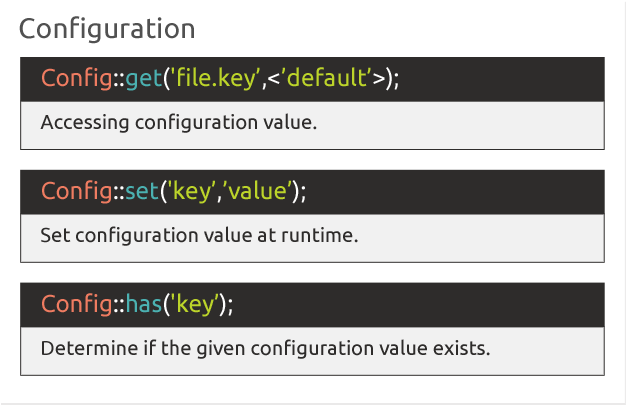
<style>
.page{position:relative;width:627px;height:405px;background:#ffffff}
.page>*{position:absolute;margin:0}
.t1{font:28.2px "Ubuntu";color:#515151}
.t2{font:24.2px "Ubuntu";color:#bcd42a}
.t3{font:24.2px "Ubuntu";color:#ef7c61}
.t4{font:24.2px "Ubuntu";color:#ffffff}
.t5{font:24.2px "Ubuntu";color:#4bb1b1}
.t6{font:20.2px "Ubuntu";color:#2e2c2b}
</style>
<div class="page">
<p class="t1" style="left:19px;top:16px;width:175px;height:28px">Configuration</p>
<p class="t2" style="left:42px;top:67px;width:356px;height:24px"><span class="t3">Config</span><span class="t4">::</span><span class="t5">get</span><span class="t4">(</span>'file.key’<span class="t4">,&lt;</span>’default’<span class="t4">&gt;);</span></p>
<p class="t6" style="left:40px;top:113px;width:277px;height:20px">Accessing configuration value.</p>
<p class="t2" style="left:42px;top:180px;width:263px;height:24px"><span class="t3">Config</span><span class="t4">::</span><span class="t5">set</span><span class="t4">(</span>'key’<span class="t4">,</span>’value’<span class="t4">);</span></p>
<p class="t6" style="left:41px;top:226px;width:317px;height:20px">Set configuration value at runtime.</p>
<p class="t3" style="left:42px;top:293px;width:190px;height:24px">Config<span class="t4">::</span><span class="t5">has</span><span class="t4">(</span><span class="t2">'key’</span><span class="t4">);</span></p>
<p class="t6" style="left:42px;top:339px;width:448px;height:20px">Determine if the given configuration value exists.</p>
</div>
